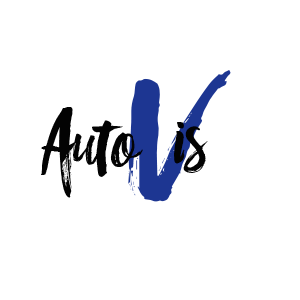
<style>
.page{position:relative;width:300px;height:300px;background:#ffffff}
.page>*{position:absolute;margin:0}
.t1{font:333.3px "RofiTaste";color:#1d3692}
.t2{font:100px "RofiTaste";color:#030303}
</style>
<div class="page">
<p class="t1" style="left:128px;top:70px;width:103px;height:132px">v</p>
<p class="t2" style="left:41px;top:107px;width:102px;height:91px">Auto</p>
<p class="t2" style="left:174px;top:122px;width:34px;height:51px">is</p>
</div>
